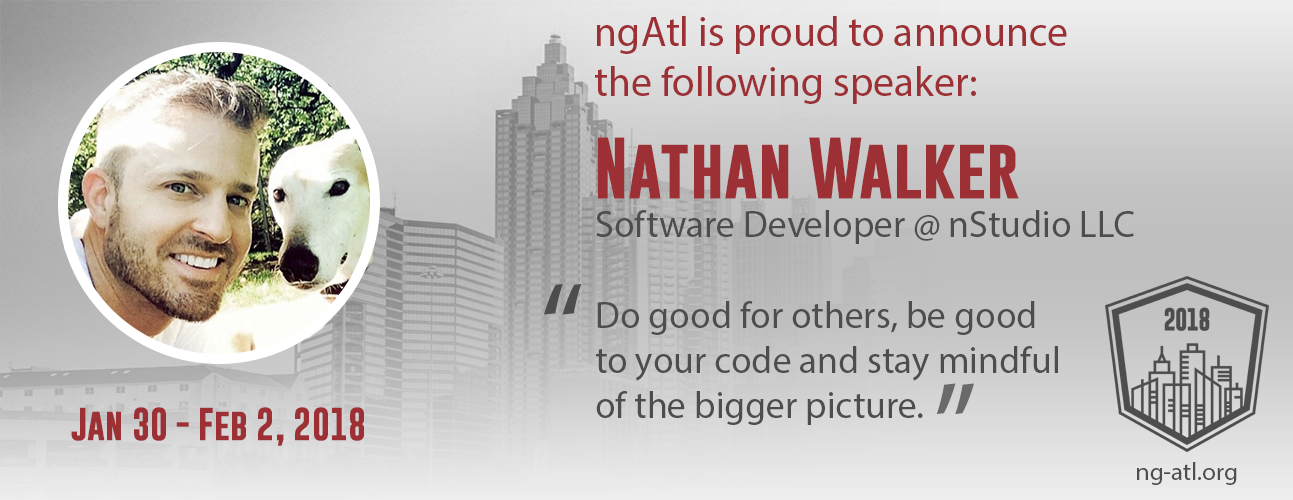
<style>
.page{position:relative;width:1293px;height:500px}
.page>*{position:absolute;margin:0}
.t1{font:41.7px "MyriadPro-Regular";color:#9d3035}
.t2{font:62.5px "GoboldBold";color:#9d3035}
.t3{font:37.5px "MyriadPro-Regular";color:#4d4d4e}
.t4{font:125px "MyriadPro-Regular";color:#4d4d4e}
.t5{font:125px "MyriadPro-Regular";color:#6a6a6b}
.t6{font:33.3px "GoboldBold";color:#9d3035}
.t7{font:25px "MyriadPro-Regular";color:#4d4d4e}
</style>
<div class="page">
<p class="t1" style="left:595px;top:16px;width:472px;height:88px">ngAtl is proud to announce the following speaker:</p>
<p class="t2" style="left:598px;top:137px;width:421px;height:62px">Nathan Walker</p>
<p class="t3" style="left:596px;top:210px;width:538px;height:34px">Software Developer @ nStudio LLC</p>
<p class="t4" style="left:544px;top:283px;width:38px;height:32px">“</p>
<p class="t3" style="left:596px;top:301px;width:462px;height:124px">Do good for others, be good to your code and stay mindful of the bigger picture.</p>
<p class="t5" style="left:936px;top:383px;width:38px;height:32px;rotate:180deg">“</p>
<p class="t6" style="left:71px;top:407px;width:293px;height:39px">Jan 30 - Feb 2, 2018</p>
<p class="t7" style="left:1137px;top:462px;width:100px;height:23px">ng-atl.org</p>
</div>
